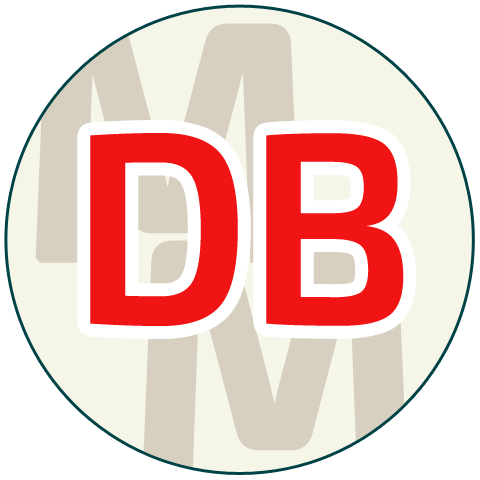
<style>
.page{position:relative;width:480px;height:480px;background:#ffffff}
.page>*{position:absolute;margin:0}
.t1{font:270.8px "Exo2-SemiBold";letter-spacing:-0.05em;color:#f01414;font-weight:bold}
</style>
<div class="page">
<p class="t1" style="left:90px;top:133px;width:314px;height:193px">DB</p>
</div>
